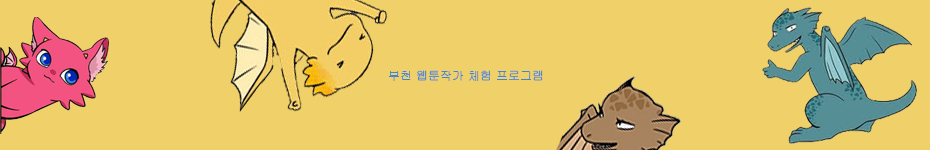
<style>
.page{position:relative;width:930px;height:150px;background:#f0d069}
.page>*{position:absolute;margin:0}
.t1{font:12px "Gulim";color:#4185d8}
</style>
<div class="page">
<p class="t1" style="left:389px;top:70px;width:154px;height:11px">부천 웹툰작가 체험 프로그램</p>
</div>
